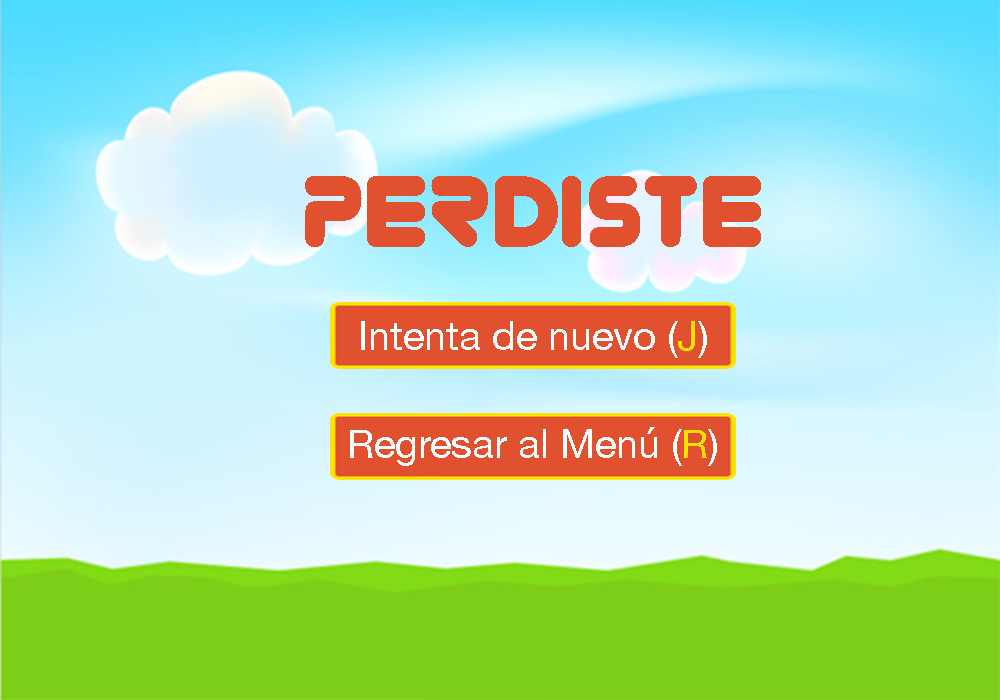
<style>
.page{position:relative;width:1000px;height:700px}
.page>*{position:absolute;margin:0}
.t1{font:100px "Zorque-Regular";color:#e15130}
.t2{font:40px "HelveticaNeue";color:#ffffff}
.t3{font:40px "HelveticaNeue";color:#ffe100}
</style>
<div class="page">
<p class="t1" style="left:305px;top:176px;width:456px;height:71px">Perdiste</p>
<p class="t2" style="left:361px;top:321px;width:346px;height:37px">Intenta de nuevo (<span class="t3">J</span>)</p>
<p class="t2" style="left:350px;top:427px;width:367px;height:39px">Regresar al Menú (<span class="t3">R</span>)</p>
</div>
